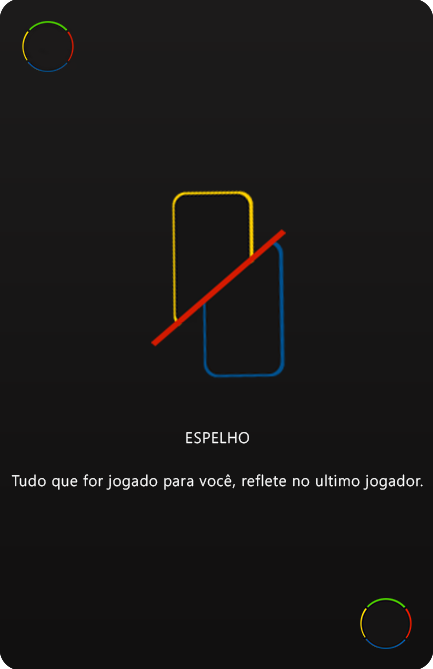
<style>
.page{position:relative;width:433px;height:669px}
.page>*{position:absolute;margin:0}
.t1{font:15.2px "NirmalaUI-Semilight";letter-spacing:0.05em;color:#ffffff}
</style>
<div class="page">
<p class="t1" style="left:186px;top:432px;width:63px;height:12px">ESPELHO</p>
<p class="t1" style="left:11px;top:474px;width:412px;height:16px">Tudo que for jogado para você, reflete no ultimo jogador.</p>
</div>
